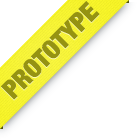
<style>
.page{position:relative;width:139px;height:139px;background:#ffffff}
.page>*{position:absolute;margin:0}
.t1{font:26px "HelveticaNeue-CondensedBlack";color:#959312}
</style>
<div class="page">
<p class="t1" style="left:0px;top:1px;width:100px;height:99px;rotate:-45deg">PROTOTYPE</p>
</div>
